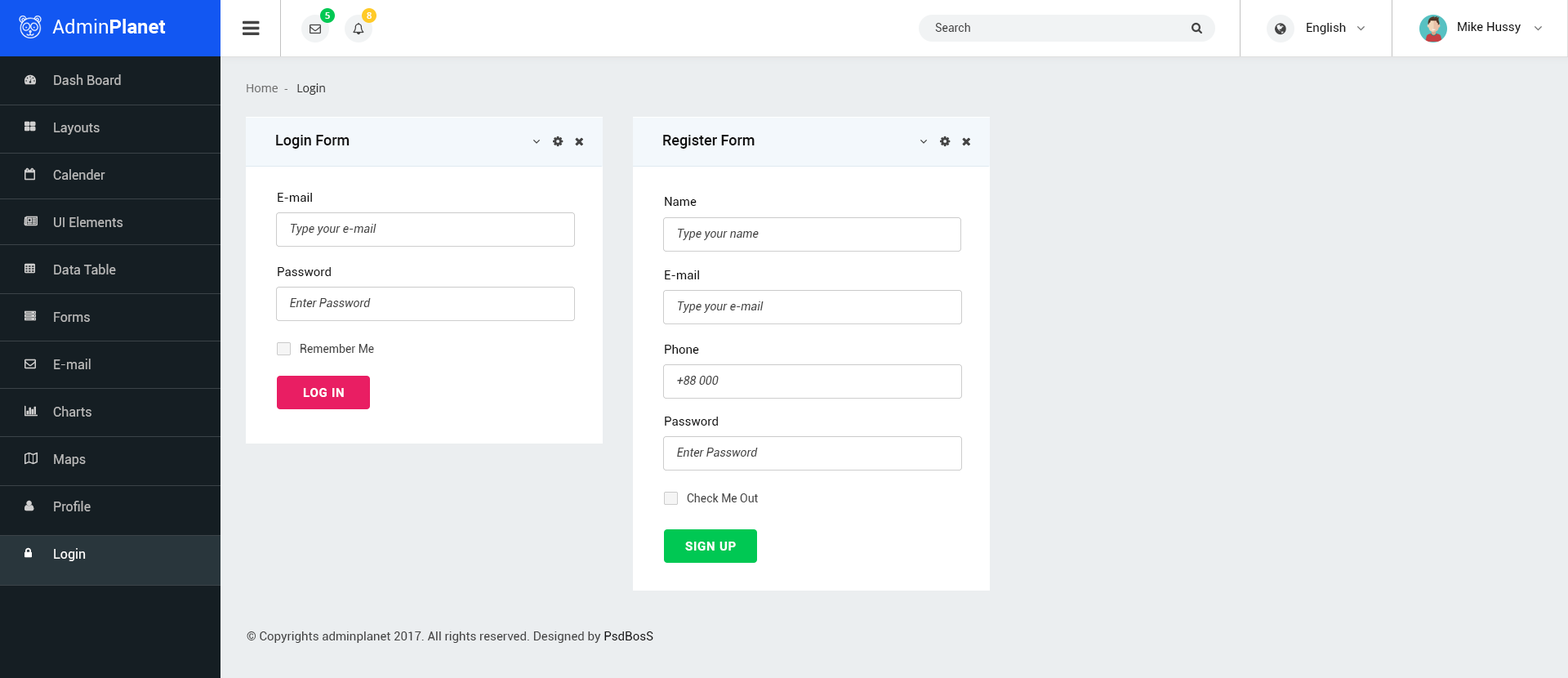
<style>
.page{position:relative;width:1568px;height:678px;background:#ebeef0}
.page>*{position:absolute;margin:0}
.t1{font:9px "OpenSans-Semibold";color:#ffffff}
.t2{font:11.4px "Roboto-Regular";color:#444444}
.t3{font:12.2px "Roboto-Regular";color:#111111}
.t4{font:13.1px/47.4px "Roboto-Regular";color:#b9b9b9}
.t5{font:13.1px/47.4px "Roboto-Regular";color:#ffffff}
.t6{font:11.4px "OpenSans";color:#707070}
.t7{font:11.4px "OpenSans";color:#333333}
.t8{font:14.7px "Roboto-Medium";color:#111111}
.t9{font:11.4px "Roboto-Regular";color:#444444;font-style:italic}
.t10{font:12.2px "Roboto-Bold";letter-spacing:0.05em;color:#ffffff;text-transform:uppercase}
.t11{font:12.2px "Roboto-Regular";color:#444444}
</style>
<div class="page">
<p class="t1" style="left:325px;top:12px;width:5px;height:7px">5</p>
<p class="t1" style="left:367px;top:12px;width:5px;height:7px">8</p>
<p class="t2" style="left:935px;top:23px;width:35px;height:9px">Search</p>
<p class="t3" style="left:1307px;top:23px;width:39px;height:11px">English</p>
<p class="t3" style="left:1458px;top:22px;width:63px;height:11px">Mike Hussy</p>
<p class="t4" style="left:53px;top:74px;width:70px;height:487px">Dash Board<br>Layouts<br>Calender<br>UI Elements<br>Data Table<br>Forms<br>E-mail<br>Charts<br>Maps<br>Profile<br><span class="t5">Login</span></p>
<p class="t6" style="left:247px;top:83px;width:78px;height:12px">Home  -   <span class="t7">Login</span></p>
<p class="t8" style="left:276px;top:135px;width:74px;height:14px">Login Form</p>
<p class="t8" style="left:663px;top:135px;width:92px;height:14px">Register Form</p>
<p class="t3" style="left:278px;top:193px;width:34px;height:9px">E-mail</p>
<p class="t3" style="left:665px;top:197px;width:32px;height:9px">Name</p>
<p class="t9" style="left:291px;top:224px;width:85px;height:11px">Type your e-mail</p>
<p class="t9" style="left:678px;top:229px;width:81px;height:11px">Type your name</p>
<p class="t3" style="left:278px;top:267px;width:53px;height:9px">Password</p>
<p class="t3" style="left:665px;top:270px;width:34px;height:9px">E-mail</p>
<p class="t9" style="left:290px;top:298px;width:81px;height:9px">Enter Password</p>
<p class="t9" style="left:678px;top:301px;width:86px;height:12px">Type your e-mail</p>
<p class="t2" style="left:301px;top:344px;width:73px;height:9px">Remember Me</p>
<p class="t3" style="left:665px;top:345px;width:34px;height:9px">Phone</p>
<p class="t9" style="left:677px;top:376px;width:42px;height:9px">+88 000</p>
<p class="t10" style="left:303px;top:388px;width:41px;height:9px">Log in</p>
<p class="t3" style="left:665px;top:416px;width:53px;height:9px">Password</p>
<p class="t9" style="left:677px;top:448px;width:81px;height:9px">Enter Password</p>
<p class="t2" style="left:687px;top:493px;width:71px;height:9px">Check Me Out</p>
<p class="t10" style="left:685px;top:541px;width:51px;height:9px">Sign up</p>
<p class="t11" style="left:247px;top:631px;width:406px;height:12px">© Copyrights adminplanet 2017. All rights reserved. Designed by <span class="t3">PsdBosS</span></p>
</div>
